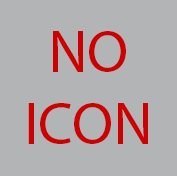
<style>
.page{position:relative;width:177px;height:176px;background:#b3b4b6}
.page>*{position:absolute;margin:0}
.t1{font:60px "MyriadPro-Regular";color:#cc0101}
</style>
<div class="page">
<p class="t1" style="left:28px;top:31px;width:120px;height:113px;text-align:center">NO<br>ICON</p>
</div>
